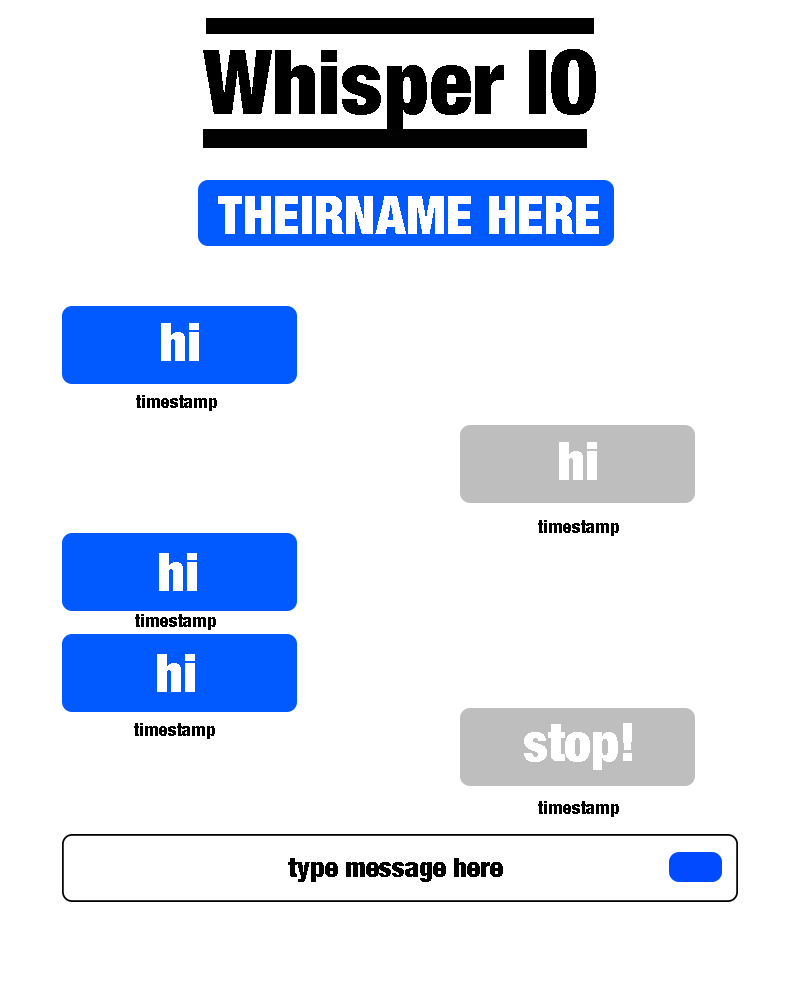
<style>
.page{position:relative;width:800px;height:1000px;background:#ffffff}
.page>*{position:absolute;margin:0}
.t1{font:53.3px "HelveticaNeue-CondensedBlack";color:#ffffff}
.t2{font:17.8px "HelveticaNeue-CondensedBlack";color:#000000}
.t3{font:26.7px "HelveticaNeue-CondensedBlack";color:#000000}
</style>
<div class="page">
<p class="t1" style="left:218px;top:196px;width:381px;height:38px">THEIRNAME HERE</p>
<p class="t1" style="left:161px;top:323px;width:38px;height:38px">hi</p>
<p class="t2" style="left:136px;top:395px;width:81px;height:16px">timestamp</p>
<p class="t1" style="left:559px;top:442px;width:38px;height:38px">hi</p>
<p class="t2" style="left:538px;top:520px;width:81px;height:16px">timestamp</p>
<p class="t1" style="left:159px;top:553px;width:38px;height:38px">hi</p>
<p class="t2" style="left:135px;top:614px;width:81px;height:16px">timestamp</p>
<p class="t1" style="left:157px;top:654px;width:38px;height:38px">hi</p>
<p class="t2" style="left:134px;top:723px;width:81px;height:16px">timestamp</p>
<p class="t1" style="left:524px;top:723px;width:108px;height:47px">stop!</p>
<p class="t2" style="left:538px;top:801px;width:81px;height:16px">timestamp</p>
<p class="t3" style="left:288px;top:858px;width:215px;height:24px">type message here</p>
</div>
